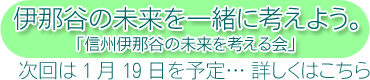
<style>
.page{position:relative;width:370px;height:80px;background:#ffffff}
.page>*{position:absolute;margin:0}
.t1{font:25px "NfMotoyaCedar-W1-90mskp-RKSJ-H";color:#006666}
.t2{font:16px "NfMotoyaCedar-W1-90mskp-RKSJ-H";color:#006666}
.t3{font:20px "NfMotoyaCedar-W1-90mskp-RKSJ-H";color:#006666}
</style>
<div class="page">
<p class="t1" style="left:14px;top:7px;width:344px;height:24px">伊那谷の未来を一緒に考えよう。</p>
<p class="t2" style="left:77px;top:36px;width:217px;height:16px">「信州伊那谷の未来を考える会」</p>
<p class="t3" style="left:19px;top:61px;width:351px;height:19px">次回は1月19日を予定… 詳しくはこちら</p>
</div>
